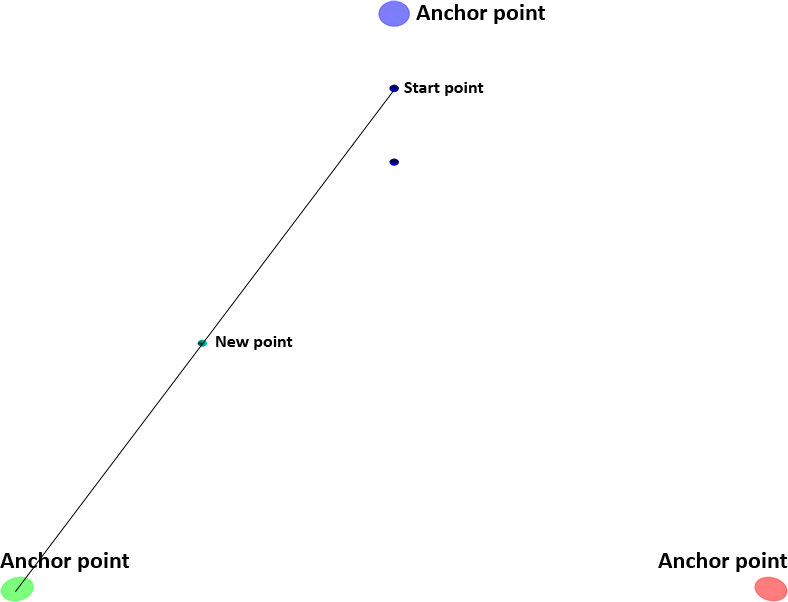
<style>
.page{position:relative;width:788px;height:602px;background:#ffffff}
.page>*{position:absolute;margin:0}
.t1{font:24px "Calibri-Bold";color:#000000}
.t2{font:18px "Calibri-Bold";color:#000000}
</style>
<div class="page">
<p class="t1" style="left:416px;top:4px;width:130px;height:20px">Anchor point</p>
<p class="t2" style="left:404px;top:82px;width:80px;height:14px">Start point</p>
<p class="t2" style="left:216px;top:336px;width:77px;height:14px">New point</p>
<p class="t1" style="left:0px;top:552px;width:130px;height:20px">Anchor point</p>
<p class="t1" style="left:658px;top:552px;width:130px;height:20px">Anchor point</p>
</div>
